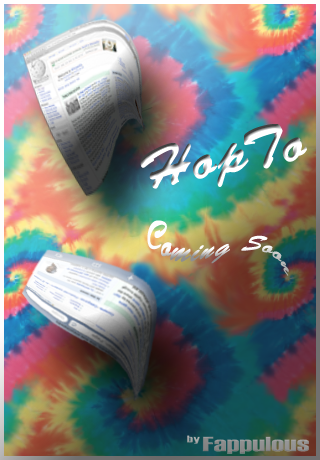
<style>
.page{position:relative;width:320px;height:460px}
.page>*{position:absolute;margin:0}
.t1{font:57.2px "BrushScriptStd";letter-spacing:0.04em;font-weight:bold}
.t2{font:30px "BrushScriptStd";letter-spacing:0.04em;scale:0.87 1}
</style>
<div class="page">
<p class="t1" style="left:140px;top:124px;width:167px;height:65px;rotate:-11deg">HopTo</p>
<p class="t2" style="left:147px;top:220px;width:142px;height:56px;rotate:23deg">Coming Soon</p>
</div>
